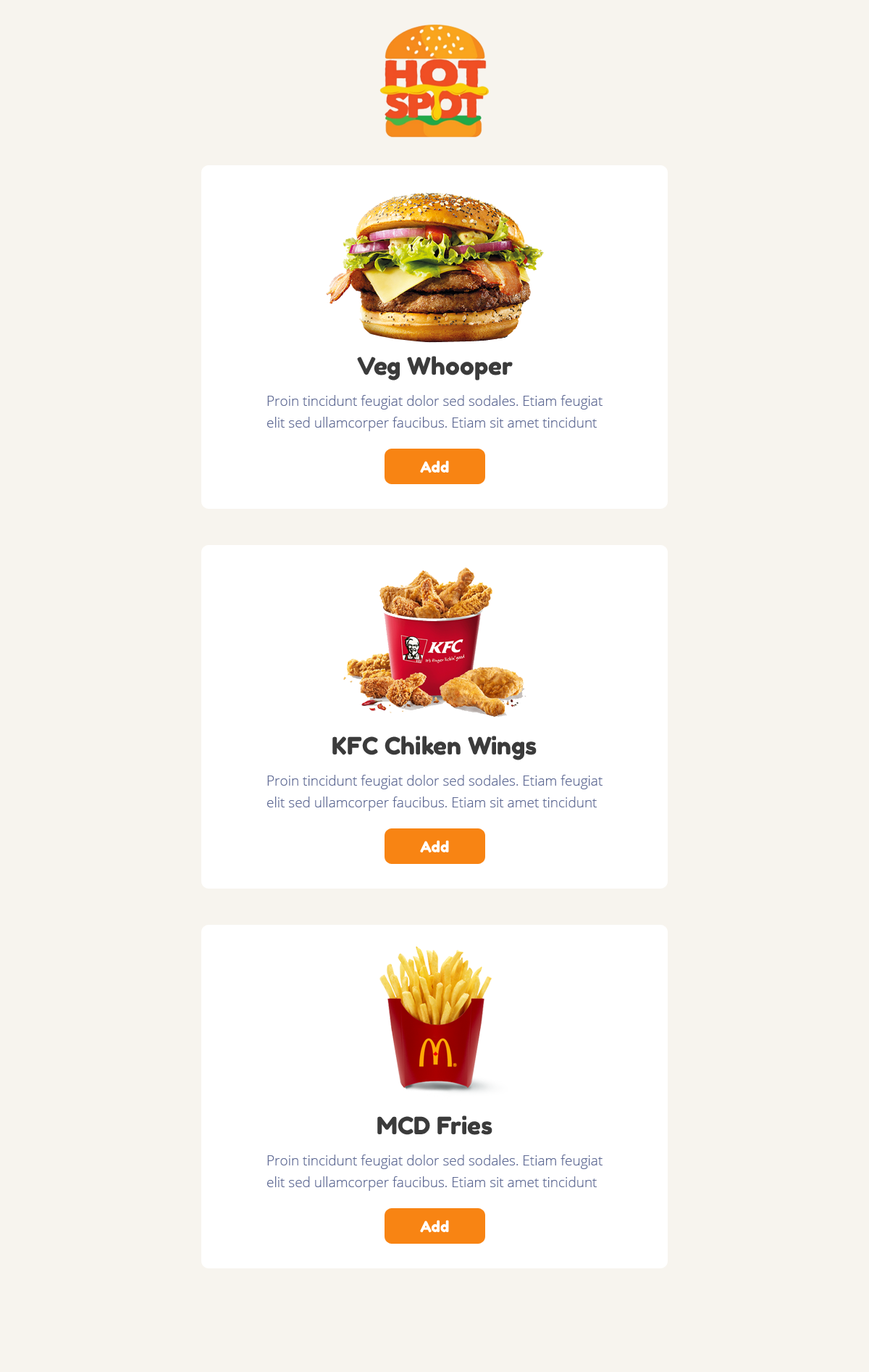
<style>
.page{position:relative;width:869px;height:1372px;background:#f7f4ee}
.page>*{position:absolute;margin:0}
.t1{font:23.9px "FredokaOne-Regular";color:#3b3b3b}
.t2{font:13.8px/21.7px "OpenSans-Light";color:#5f6a94}
.t3{font:15.2px "FredokaOne-Regular";color:#ffffff}
</style>
<div class="page">
<p class="t1" style="left:357px;top:356px;width:156px;height:24px">Veg Whooper</p>
<p class="t2" style="left:267px;top:395px;width:336px;height:36px">Proin tincidunt feugiat dolor sed sodales. Etiam feugiat elit sed ullamcorper faucibus. Etiam sit amet tincidunt</p>
<p class="t3" style="left:420px;top:460px;width:29px;height:13px">Add</p>
<p class="t1" style="left:333px;top:735px;width:204px;height:25px">KFC Chiken Wings</p>
<p class="t2" style="left:267px;top:775px;width:336px;height:36px">Proin tincidunt feugiat dolor sed sodales. Etiam feugiat elit sed ullamcorper faucibus. Etiam sit amet tincidunt</p>
<p class="t3" style="left:420px;top:840px;width:29px;height:13px">Add</p>
<p class="t1" style="left:377px;top:1115px;width:116px;height:20px">MCD Fries</p>
<p class="t2" style="left:267px;top:1154px;width:336px;height:36px">Proin tincidunt feugiat dolor sed sodales. Etiam feugiat elit sed ullamcorper faucibus. Etiam sit amet tincidunt</p>
<p class="t3" style="left:420px;top:1219px;width:29px;height:13px">Add</p>
</div>
